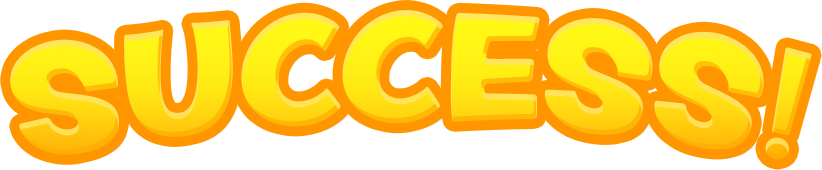
<style>
.page{position:relative;width:822px;height:170px;background:#ffffff}
.page>*{position:absolute;margin:0}
.t1{font:137.6px "PeachyKeenJF"}
</style>
<div class="page">
<p class="t1" style="left:10px;top:10px;width:802px;height:150px">SUCCESS!</p>
</div>
